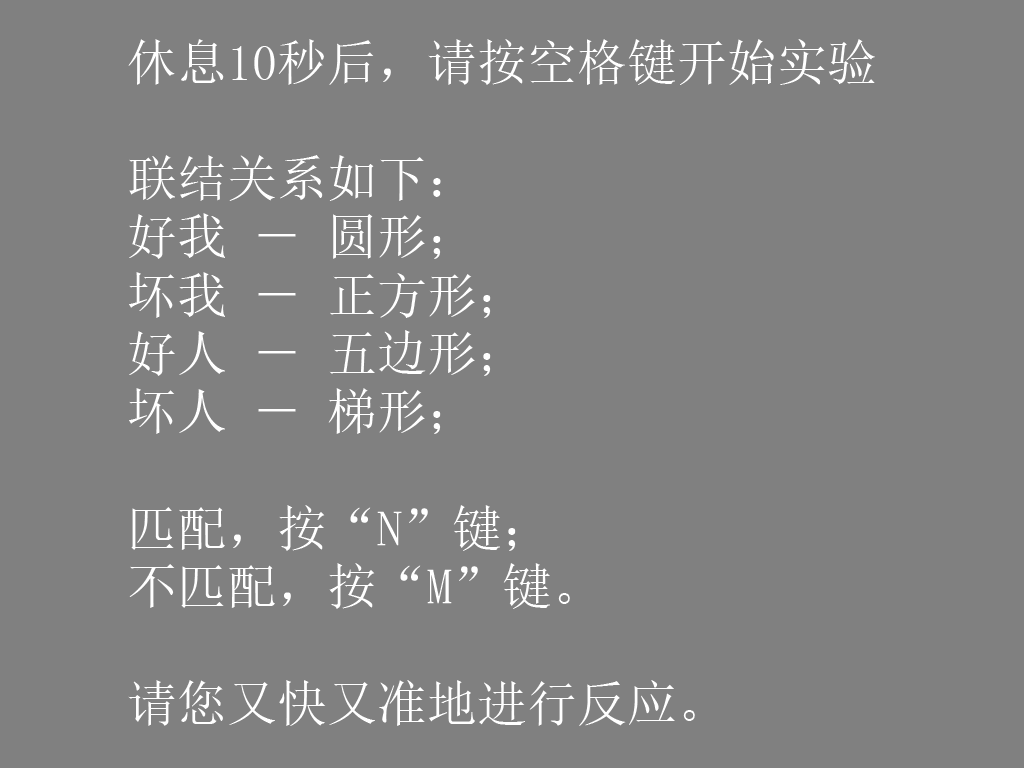
<style>
.page{position:relative;width:1024px;height:768px;background:#808080}
.page>*{position:absolute;margin:0}
.t1{font:50px/58.3px "SimSun";color:#ffffff}
</style>
<div class="page">
<p class="t1" style="left:128px;top:39px;width:747px;height:687px">休息10秒后，请按空格键开始实验<br><br>联结关系如下： <br>好我 － 圆形；<br>坏我 － 正方形；<br>好人 － 五边形；<br>坏人 － 梯形；<br><br>匹配，按“N”键；<br>不匹配，按“M”键。<br><br>请您又快又准地进行反应。</p>
</div>
